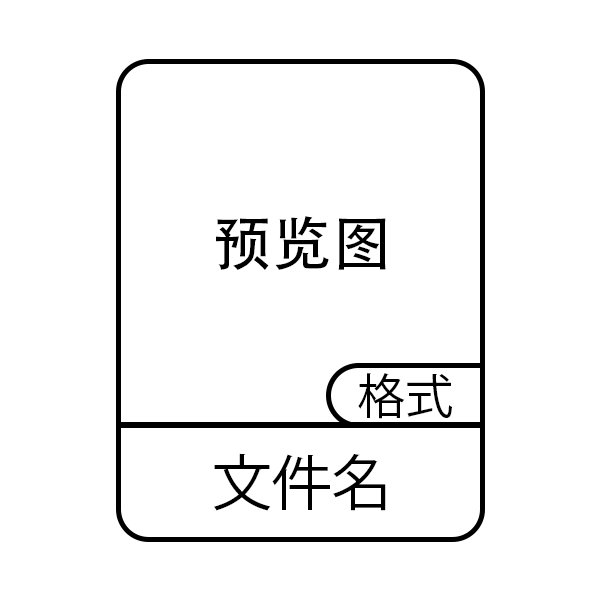
<style>
.page{position:relative;width:600px;height:600px;background:#ffffff}
.page>*{position:absolute;margin:0}
.t1{font:60px "AdobeHeitiStd-Regular";color:#000000}
.t2{font:48px "KozGoPr6N-Regular";color:#000000}
.t3{font:60px "KozGoPr6N-Regular";color:#000000}
</style>
<div class="page">
<p class="t1" style="left:216px;top:216px;width:170px;height:54px">预览图</p>
<p class="t2" style="left:358px;top:373px;width:94px;height:46px">格式</p>
<p class="t3" style="left:214px;top:453px;width:172px;height:58px">文件名</p>
</div>
